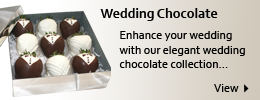
<style>
.page{position:relative;width:260px;height:100px}
.page>*{position:absolute;margin:0}
.t1{font:14px "Corbel-Bold";color:#000000}
.t2{font:12px "Corbel";color:#000000}
</style>
<div class="page">
<p class="t1" style="left:100px;top:8px;width:118px;height:13px">Wedding Chocolate</p>
<p class="t2" style="left:119px;top:31px;width:126px;height:37px">Enhance your wedding with our elegant wedding <br>chocolate collection...</p>
<p class="t2" style="left:214px;top:84px;width:25px;height:8px">View</p>
</div>
